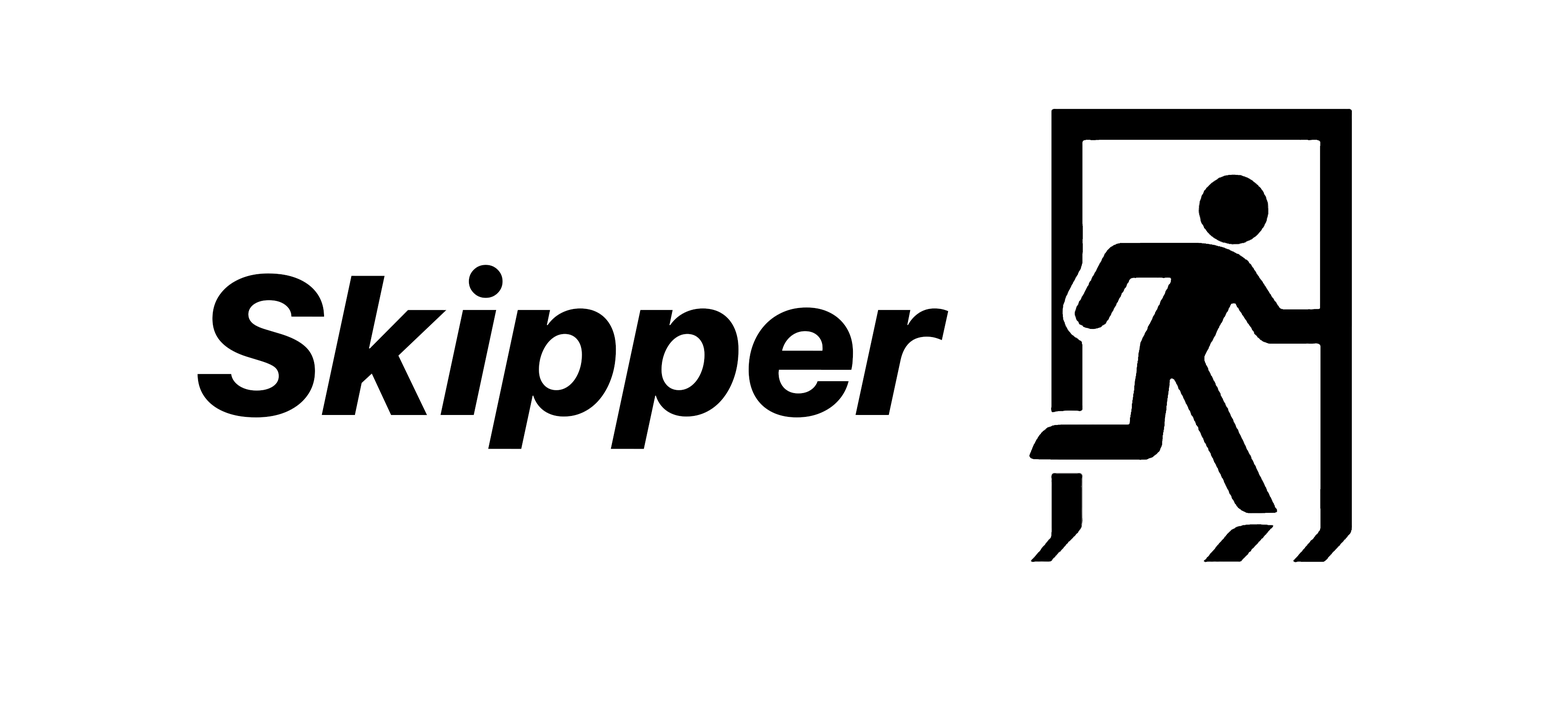
<style>
.page{position:relative;width:1568px;height:713px;background:#ffffff}
.page>*{position:absolute;margin:0}
.t1{font:197.4px "SFPro-HeavyItalic";color:#000000}
</style>
<div class="page">
<p class="t1" style="left:197px;top:265px;width:751px;height:184px">Skipper</p>
</div>
